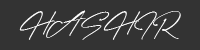
<style>
.page{position:relative;width:200px;height:50px;background:#333333}
.page>*{position:absolute;margin:0}
.t1{font:33.3px "CreattionDemo";color:#ffffff;text-transform:uppercase}
</style>
<div class="page">
<p class="t1" style="left:19px;top:10px;width:162px;height:30px">Hashir</p>
</div>
